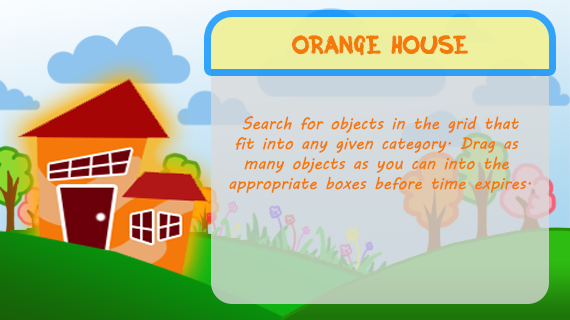
<style>
.page{position:relative;width:570px;height:320px}
.page>*{position:absolute;margin:0}
.t1{font:25px "Inky";color:#f5780a}
.t2{font:16.7px "MVBoli";color:#f5780a}
</style>
<div class="page">
<p class="t1" style="left:291px;top:35px;width:178px;height:21px">ORANGE HOUSE</p>
<p class="t2" style="left:229px;top:116px;width:302px;height:77px;text-align:center">Search for objects in the grid that<br>fit into any given category. Drag as <br>many objects as you can into the <br>appropriate boxes before time expires.</p>
</div>
